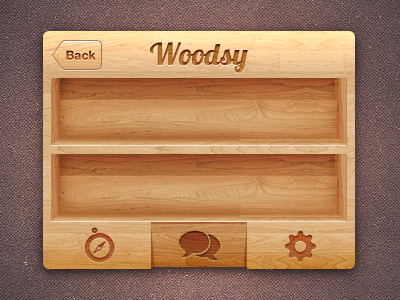
<style>
.page{position:relative;width:400px;height:300px}
.page>*{position:absolute;margin:0}
.t1{font:12.3px "HelveticaNeue-Bold"}
.t2{font:30px "Lobster1.0";letter-spacing:0.01em}
</style>
<div class="page">
<p class="t1" style="left:66px;top:50px;width:30px;height:10px">Back</p>
<p class="t2" style="left:150px;top:42px;width:98px;height:31px">Woodsy</p>
</div>
